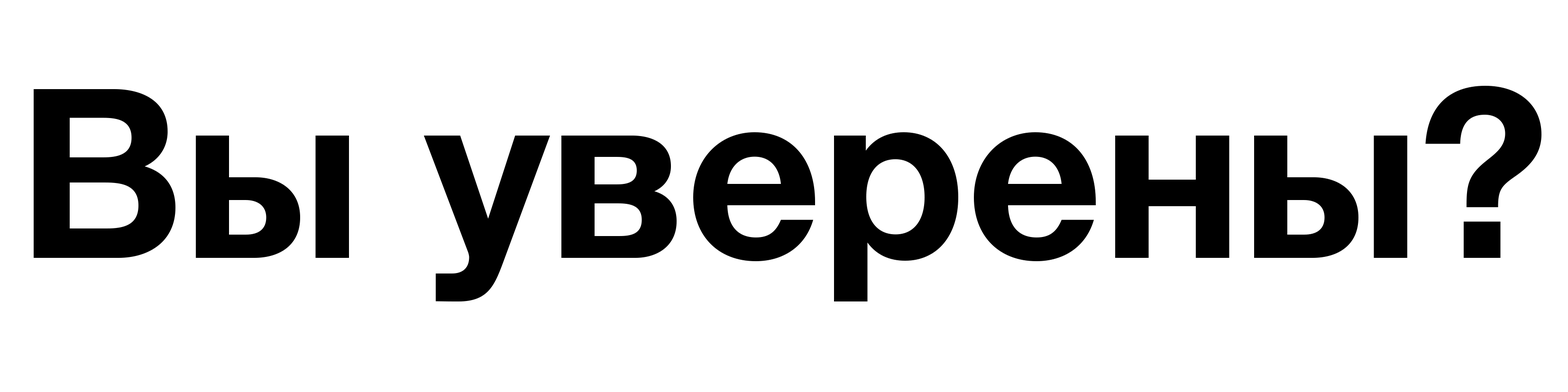
<style>
.page{position:relative;width:1568px;height:392px;background:#ffffff}
.page>*{position:absolute;margin:0}
.t1{font:237.1px "HelveticaNeueCyr-Bold";color:#000000}
</style>
<div class="page">
<p class="t1" style="left:34px;top:86px;width:1507px;height:216px">Вы уверены?</p>
</div>
